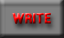
<style>
.page{position:relative;width:64px;height:38px;background:#808080}
.page>*{position:absolute;margin:0}
.t1{font:14px "GothicXB-HM"}
</style>
<div class="page">
<p class="t1" style="left:12px;top:13px;width:39px;height:11px">WRITE</p>
</div>
